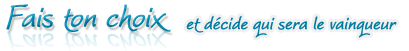
<style>
.page{position:relative;width:409px;height:51px;background:#ffffff}
.page>*{position:absolute;margin:0}
.t1{font:40px "WorstveldSlingExtra2Oblique";color:#028db8;font-weight:bold}
.t2{font:24px "WorstveldSlingExtra2Oblique";color:#007da3;font-weight:bold}
.t3{font:40px "WorstveldSlingExtra2Oblique";color:#def0f6;font-weight:bold}
</style>
<div class="page">
<p class="t1" style="left:6px;top:4px;width:165px;height:28px">Fais ton choix</p>
<p class="t2" style="left:186px;top:16px;width:211px;height:22px">et décide qui sera le vainqueur</p>
<p class="t3" style="left:7px;top:29px;width:165px;height:22px">Fais ton choix</p>
</div>
